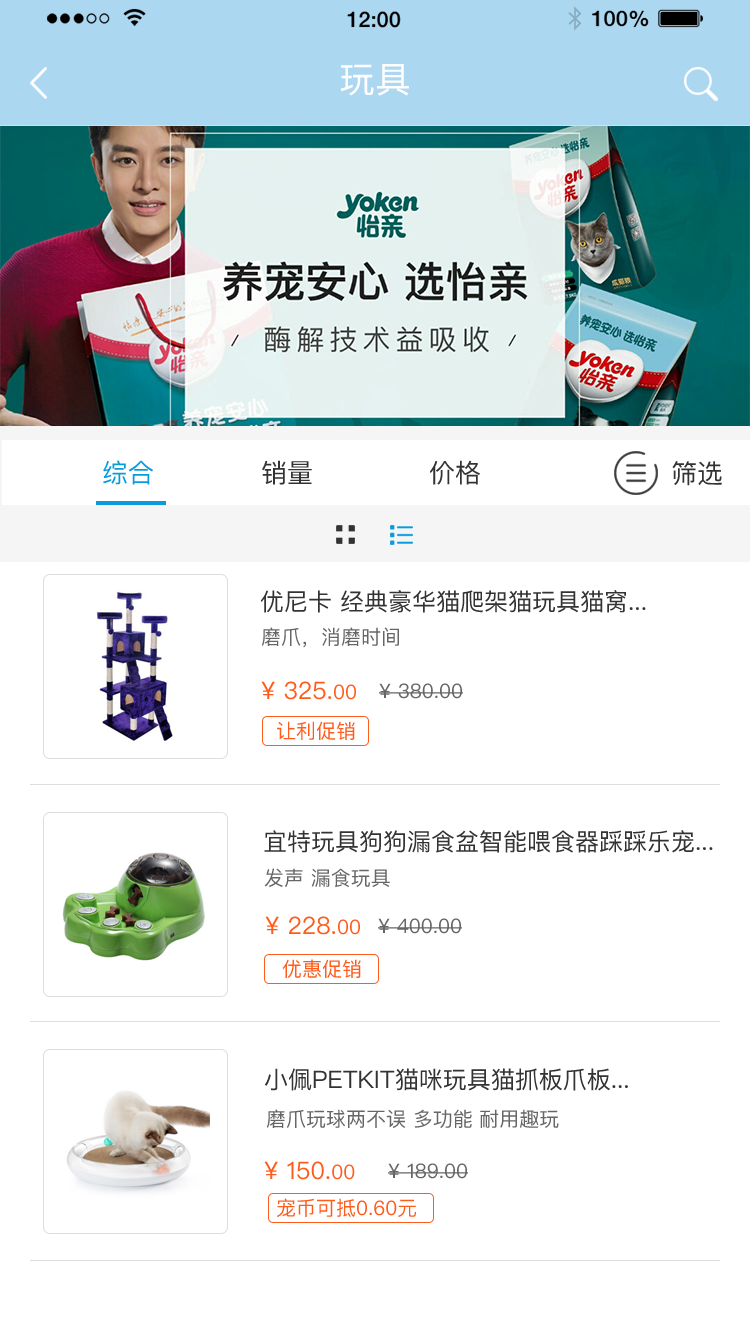
<style>
.page{position:relative;width:750px;height:1334px;background:#ffffff}
.page>*{position:absolute;margin:0}
.t1{font:36px "PingFangSC";color:#fefefe}
.t2{font:26px "PingFangSC";color:#0a9cda}
.t3{font:26px "PingFangSC";color:#333333}
.t4{font:26px "PingFangSC-Regular";color:#333333}
.t5{font:24px "PingFangSC";color:#333333}
.t6{font:20px "PingFangSC";color:#666666}
.t7{font:24px "PingFangSC";color:#ff5c1c}
.t8{font:20px "PingFangSC";color:#ff5c1c}
</style>
<div class="page">
<p class="t1" style="left:340px;top:64px;width:69px;height:32px">玩具</p>
<p class="t2" style="left:103px;top:460px;width:50px;height:25px">综合</p>
<p class="t3" style="left:262px;top:460px;width:50px;height:25px">销量</p>
<p class="t3" style="left:430px;top:460px;width:50px;height:25px">价格</p>
<p class="t4" style="left:672px;top:461px;width:50px;height:25px">筛选</p>
<p class="t5" style="left:261px;top:590px;width:385px;height:23px">优尼卡 经典豪华猫爬架猫玩具猫窝...</p>
<p class="t6" style="left:261px;top:627px;width:138px;height:21px">磨爪，消磨时间</p>
<p class="t7" style="left:261px;top:681px;width:95px;height:19px">¥ 325.<span class="t8">00</span></p>
<p class="t6" style="left:379px;top:683px;width:84px;height:16px">¥ 380.00</p>
<p class="t8" style="left:277px;top:721px;width:78px;height:19px">让利促销</p>
<p class="t5" style="left:264px;top:830px;width:449px;height:23px">宜特玩具狗狗漏食盆智能喂食器踩踩乐宠...</p>
<p class="t6" style="left:264px;top:868px;width:126px;height:19px">发声 漏食玩具</p>
<p class="t7" style="left:265px;top:916px;width:95px;height:19px">¥ 228.<span class="t8">00</span></p>
<p class="t6" style="left:378px;top:918px;width:84px;height:16px">¥ 400.00</p>
<p class="t8" style="left:282px;top:959px;width:79px;height:19px">优惠促销</p>
<p class="t5" style="left:264px;top:1068px;width:364px;height:23px">小佩PETKIT猫咪玩具猫抓板爪板...</p>
<p class="t6" style="left:266px;top:1109px;width:293px;height:19px">磨爪玩球两不误 多功能 耐用趣玩</p>
<p class="t7" style="left:264px;top:1161px;width:91px;height:19px">¥ 150.<span class="t8">00</span></p>
<p class="t6" style="left:388px;top:1163px;width:80px;height:16px">¥ 189.00</p>
<p class="t8" style="left:277px;top:1198px;width:139px;height:19px">宠币可抵0.60元</p>
</div>
